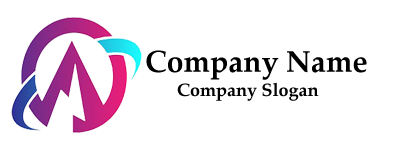
<style>
.page{position:relative;width:400px;height:150px;background:#ffffff}
.page>*{position:absolute;margin:0}
.t1{font:30px "PalatinoLinotype-Bold";color:#000000}
.t2{font:18px "PalatinoLinotype-Bold";color:#000000}
</style>
<div class="page">
<p class="t1" style="left:146px;top:50px;width:221px;height:30px">Company Name</p>
<p class="t2" style="left:177px;top:82px;width:142px;height:19px">Company Slogan</p>
</div>
